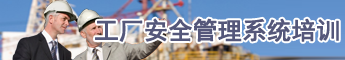
<style>
.page{position:relative;width:345px;height:60px}
.page>*{position:absolute;margin:0}
.t1{font:24px "SimHei";color:#54577a;font-weight:bold}
</style>
<div class="page">
<p class="t1" style="left:95px;top:18px;width:244px;height:24px">工厂安全管理系统培训</p>
</div>
